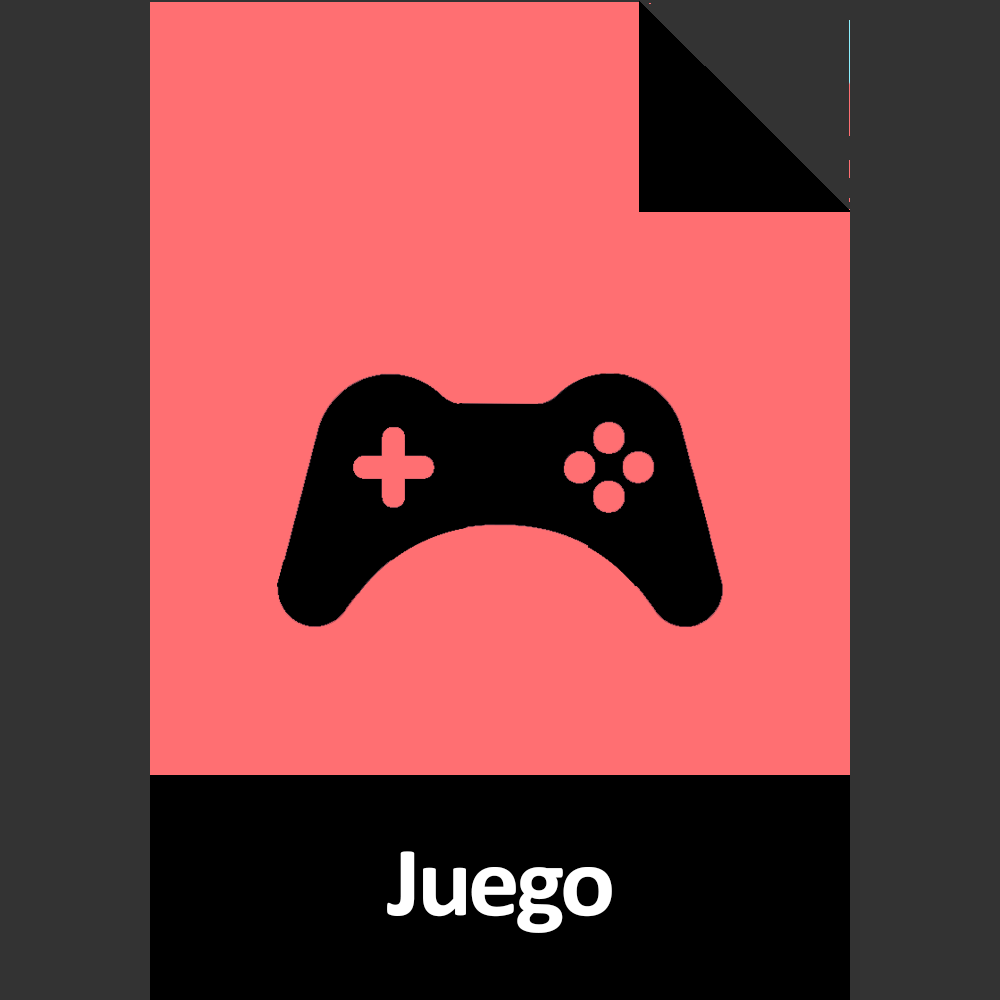
<style>
.page{position:relative;width:1000px;height:1000px;background:#ff6f72}
.page>*{position:absolute;margin:0}
.t1{font:100px "Calibri-Bold";letter-spacing:-0.04em;color:#ffffff;scale:1.03 1}
</style>
<div class="page">
<p class="t1" style="left:387px;top:851px;width:225px;height:82px">Juego</p>
</div>
